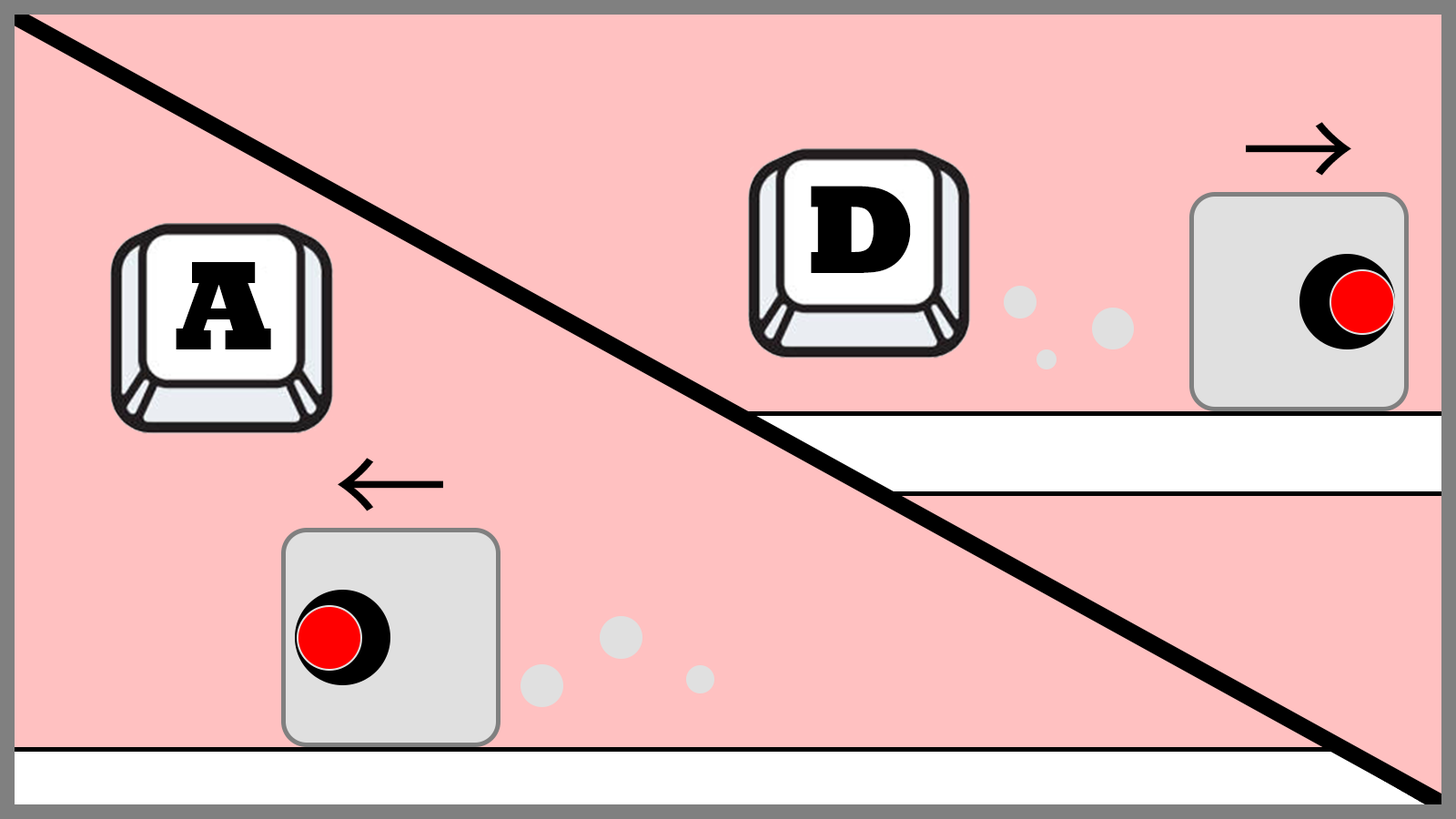
<style>
.page{position:relative;width:1456px;height:819px;background:#ffc1c1}
.page>*{position:absolute;margin:0}
.t1{font:113.7px "KozGoPr6N-Regular";letter-spacing:-0.075em;color:#000000}
.t2{font:128.1px "Rockwell-ExtraBold";letter-spacing:-0.075em;color:#000000}
.t3{font:128.7px "Rockwell-ExtraBold";letter-spacing:-0.075em;color:#000000}
</style>
<div class="page">
<p class="t1" style="left:1246px;top:122px;width:105px;height:54px">→</p>
<p class="t2" style="left:811px;top:186px;width:100px;height:87px">D</p>
<p class="t3" style="left:176px;top:262px;width:95px;height:87px">A</p>
<p class="t1" style="left:338px;top:458px;width:105px;height:53px">←</p>
</div>
